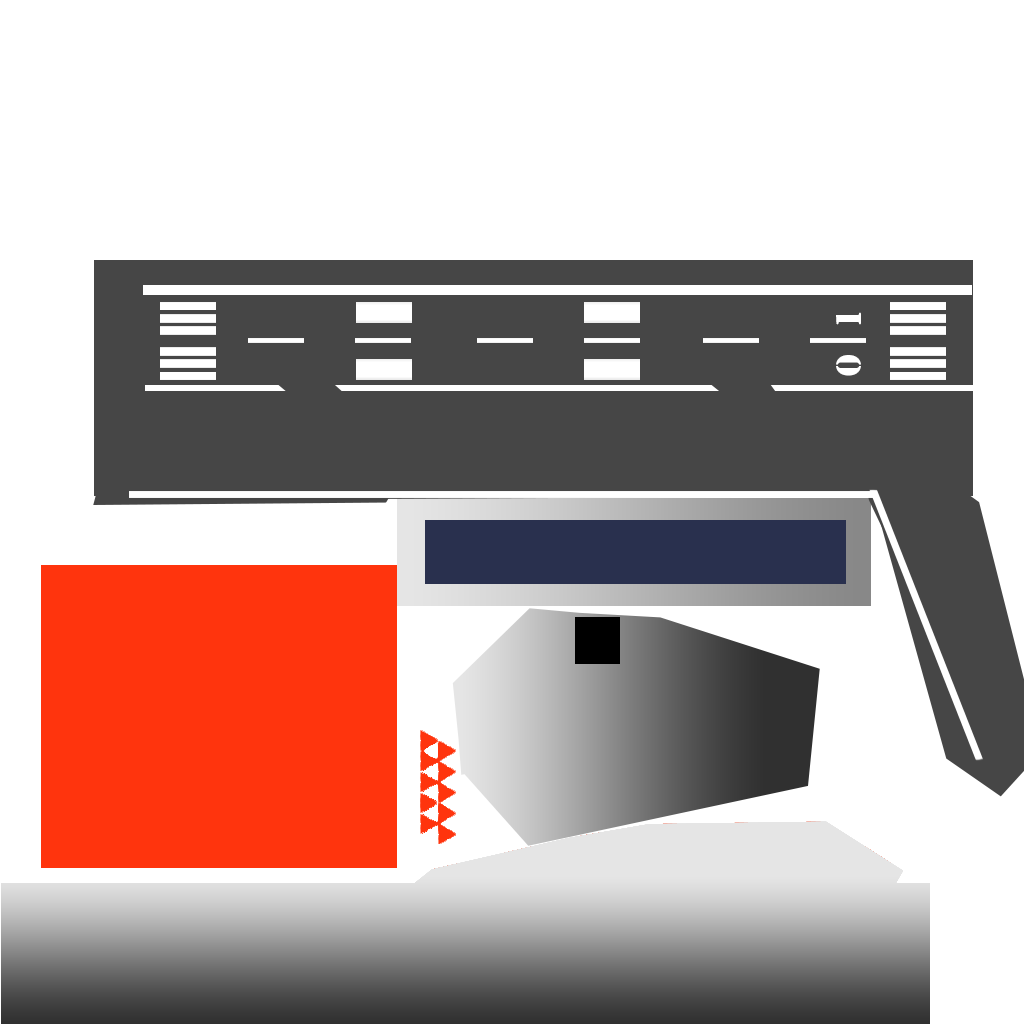
<style>
.page{position:relative;width:1024px;height:1024px;background:#ffffff}
.page>*{position:absolute;margin:0}
.t1{font:32.8px "StencilStd";letter-spacing:-0.06em;color:#ffffff}
</style>
<div class="page">
<p class="t1" style="left:836px;top:312px;width:25px;height:64px;rotate:-90deg">0   1</p>
</div>
